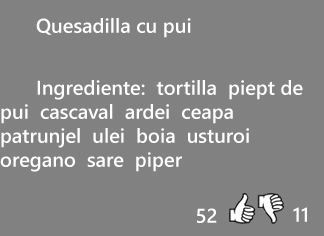
<style>
.page{position:relative;width:324px;height:236px;background:#818181}
.page>*{position:absolute;margin:0}
.t1{font:20px "SegoeUI-Semibold";color:#ffffff}
</style>
<div class="page">
<p class="t1" style="left:36px;top:18px;width:155px;height:20px">Quesadilla cu pui</p>
<p class="t1" style="left:0px;top:80px;width:303px;height:92px">Ingrediente:  tortilla  piept de pui  cascaval  ardei  ceapa  patrunjel  ulei  boia  usturoi  oregano  sare  piper</p>
<p class="t1" style="left:197px;top:208px;width:20px;height:15px">52</p>
<p class="t1" style="left:293px;top:207px;width:14px;height:15px">11</p>
</div>
